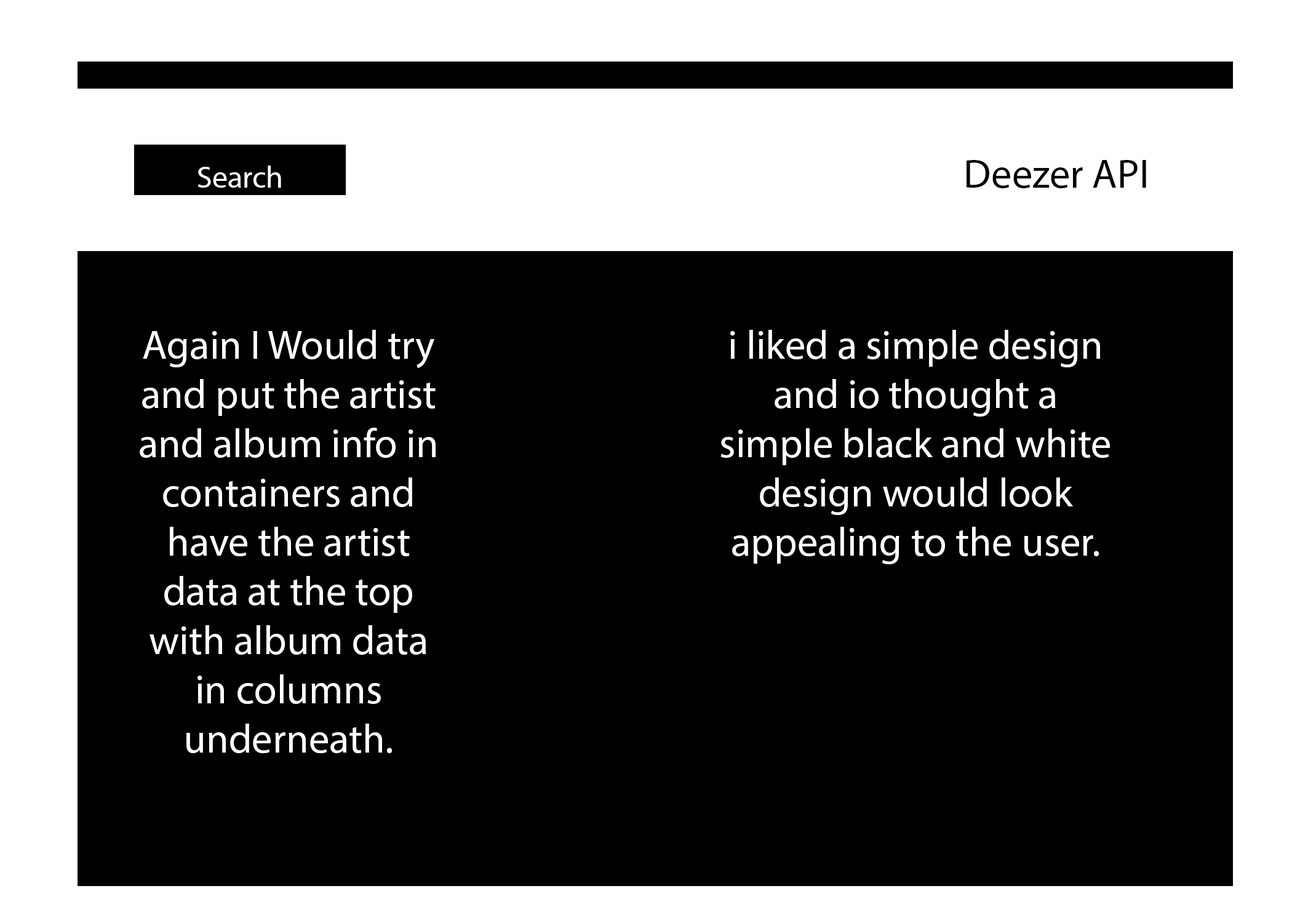
<style>
.page{position:relative;width:1292px;height:923px;background:#000000}
.page>*{position:absolute;margin:0}
.t1{font:41px "MyriadPro-Regular";color:#000000}
.t2{font:30.8px "MyriadPro-Regular";color:#ffffff}
.t3{font:41px "MyriadPro-Regular";color:#ffffff}
</style>
<div class="page">
<p class="t1" style="left:967px;top:160px;width:179px;height:28px">Deezer API</p>
<p class="t2" style="left:197px;top:166px;width:84px;height:22px">Search</p>
<p class="t3" style="left:140px;top:330px;width:296px;height:423px;text-align:center">Again I Would try and put the artist and album info in containers and have the artist data at the top with album data in columns underneath.</p>
<p class="t3" style="left:720px;top:330px;width:390px;height:234px;text-align:center">i liked a simple design and io thought a simple black and white design would look appealing to the user.</p>
</div>
